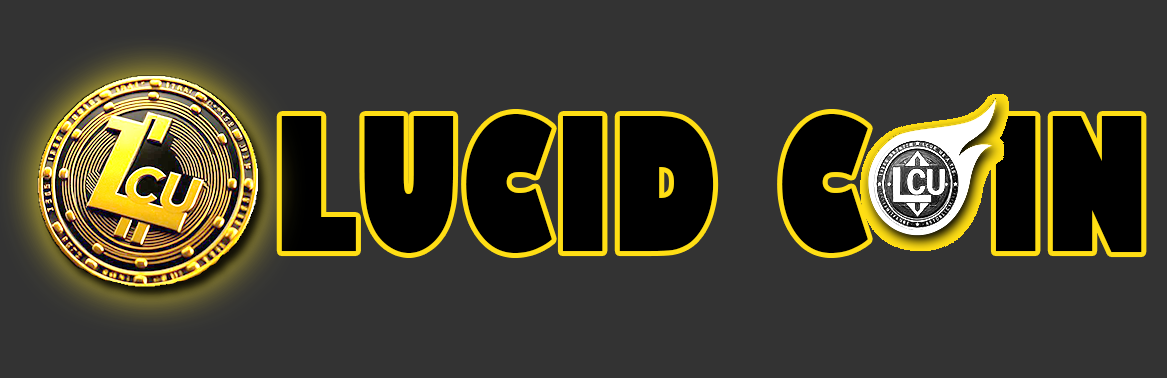
<style>
.page{position:relative;width:1167px;height:378px;background:#333333}
.page>*{position:absolute;margin:0}
.t1{font:181.2px "GillSans-UltraBoldCondensed";color:#000000}
</style>
<div class="page">
<p class="t1" style="left:281px;top:114px;width:861px;height:139px">LUCID C  IN</p>
</div>
